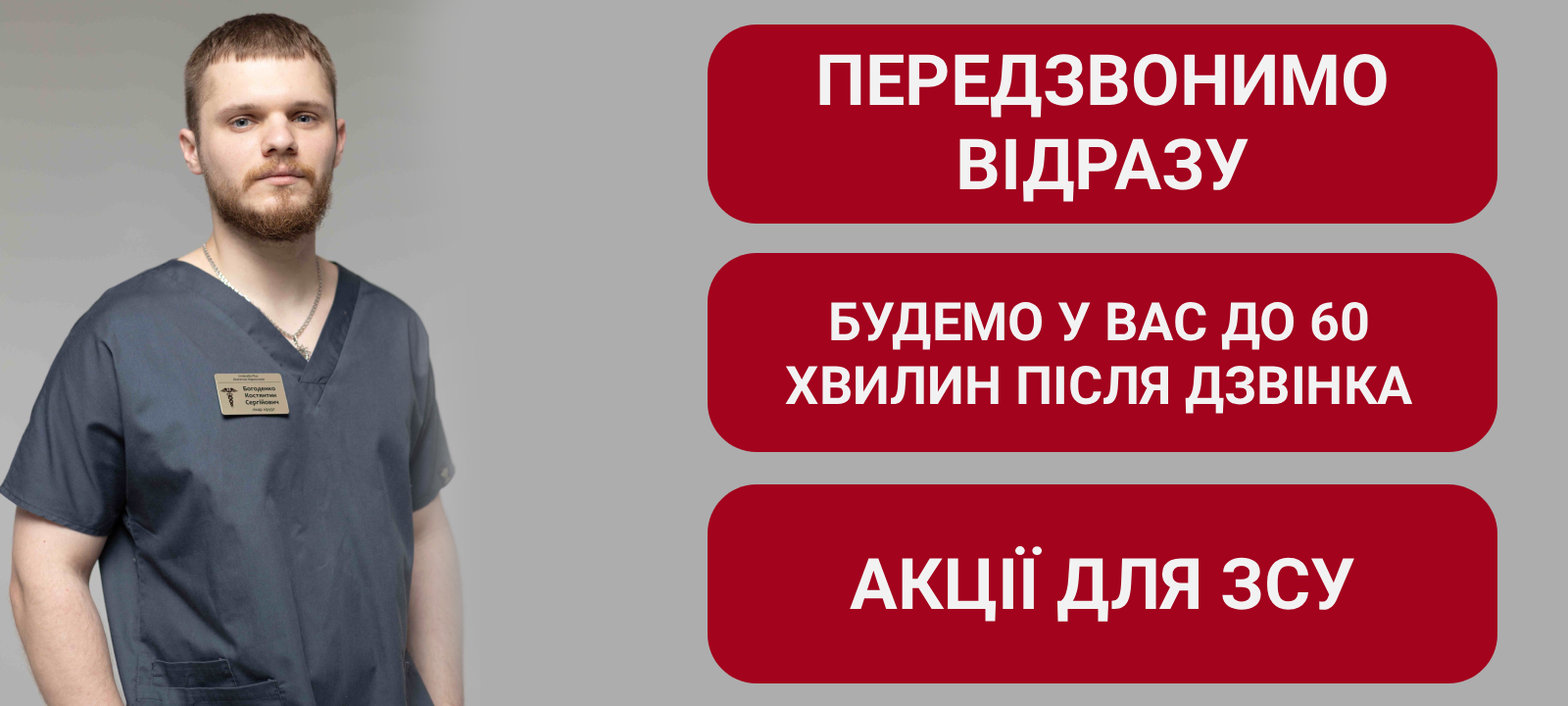
<style>
.page{position:relative;width:1568px;height:706px;background:#a3031d}
.page>*{position:absolute;margin:0}
.t1{font:70.6px "Roboto-Bold";color:#f2f2f2}
.t2{font:52.9px "Roboto-Bold";color:#f2f2f2}
.t3{font:71px "Roboto-Bold";color:#f2f2f2}
</style>
<div class="page">
<p class="t1" style="left:819px;top:54px;width:568px;height:148px;text-align:center">ПЕРЕДЗВОНИМО ВІДРАЗУ</p>
<p class="t2" style="left:785px;top:302px;width:628px;height:112px;text-align:center">БУДЕМО У ВАС ДО 60 ХВИЛИН ПІСЛЯ ДЗВІНКА</p>
<p class="t3" style="left:850px;top:546px;width:504px;height:75px">АКЦІЇ ДЛЯ ЗСУ</p>
</div>
